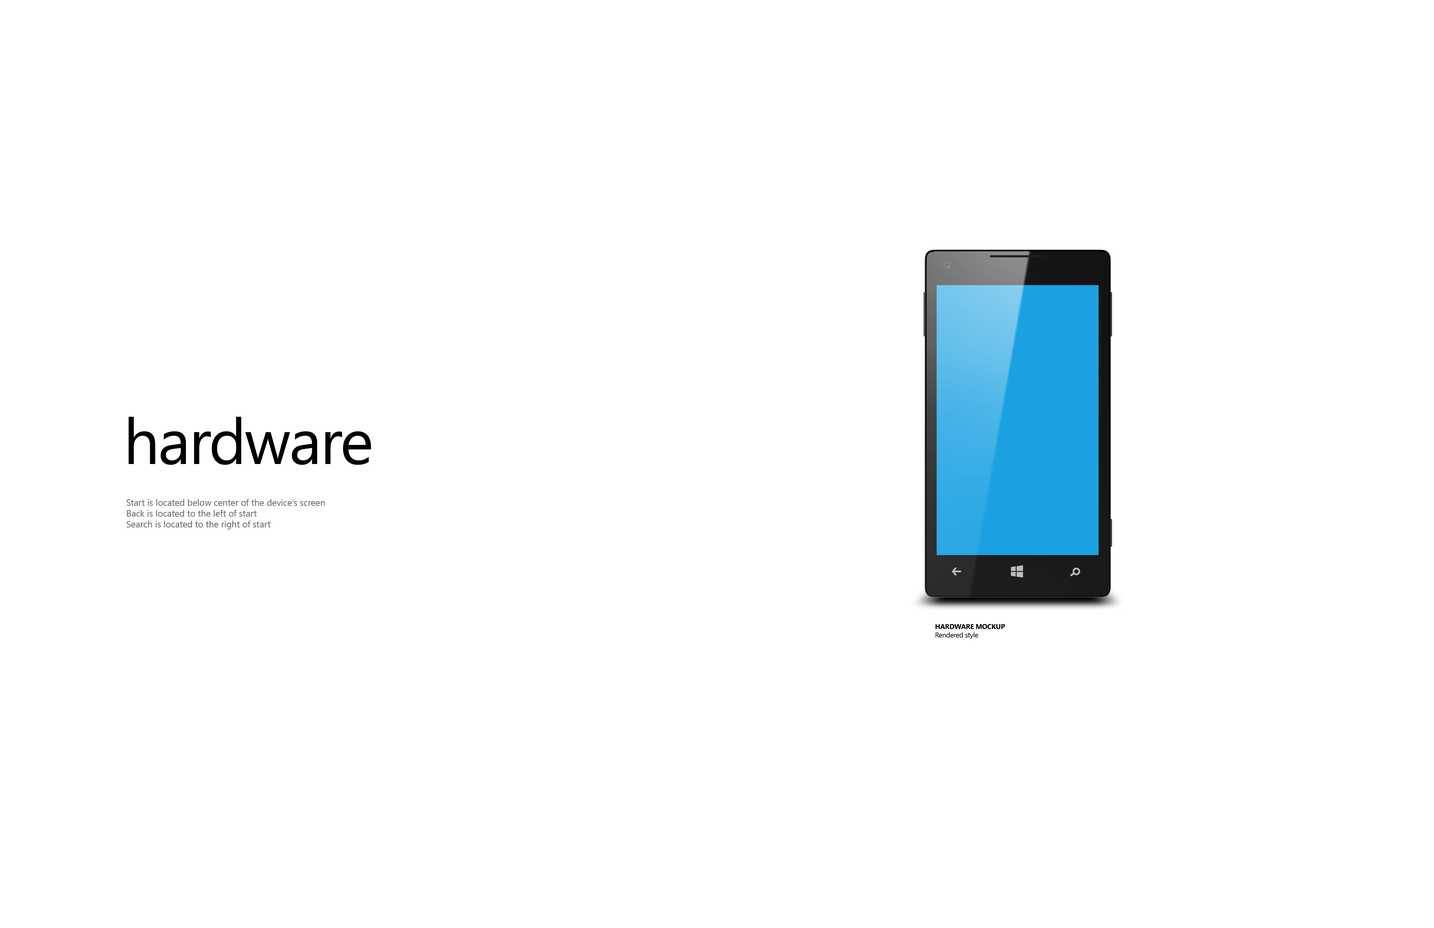
<style>
.page{position:relative;width:1434px;height:928px;background:#ffffff}
.page>*{position:absolute;margin:0}
.t1{font:63.9px "SegoeWP";letter-spacing:-0.025em;color:#000000}
.t2{font:9px "SegoeUI";color:#666666}
.t3{font:7px "SegoeWP-Bold";letter-spacing:-0.025em;color:#000000;text-transform:uppercase}
.t4{font:7px "SegoeWP";letter-spacing:-0.025em;color:#000000}
</style>
<div class="page">
<p class="t1" style="left:129px;top:417px;width:242px;height:48px">hardware</p>
<p class="t2" style="left:127px;top:499px;width:198px;height:31px">Start is located below center of the device’s screen<br>Back is located to the left of start<br>Search is located to the right of start</p>
<p class="t3" style="left:936px;top:624px;width:69px;height:15px">hardware mockup<br><span class="t4">Rendered style</span></p>
</div>
